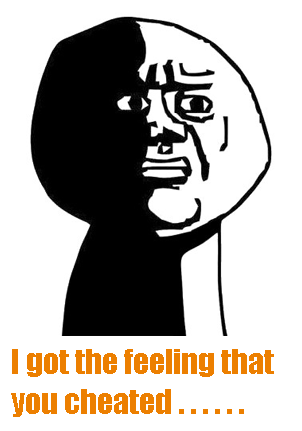
<style>
.page{position:relative;width:302px;height:431px;background:#ffffff}
.page>*{position:absolute;margin:0}
.t1{font:32px/40px "Impact";color:#ec7f00}
</style>
<div class="page">
<p class="t1" style="left:11px;top:349px;width:263px;height:68px">I got the feeling that <br>you cheated . . . . . .</p>
</div>
